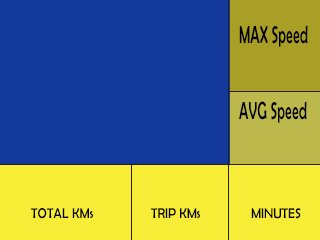
<style>
.page{position:relative;width:320px;height:240px;background:#13399b}
.page>*{position:absolute;margin:0}
.t1{font:24.9px "BerlinSansFB-Reg";color:#000000;scale:0.58 1}
.t2{font:14.3px "BerlinSansFB-Reg";color:#000000;scale:0.9 1}
.t3{font:14.3px "BerlinSansFB-Reg";color:#000000;scale:0.89 1}
</style>
<div class="page">
<p class="t1" style="left:239px;top:25px;width:69px;height:22px">MAX Speed</p>
<p class="t1" style="left:239px;top:101px;width:68px;height:22px">AVG Speed</p>
<p class="t2" style="left:31px;top:208px;width:62px;height:11px">TOTAL KMs</p>
<p class="t3" style="left:151px;top:208px;width:49px;height:10px">TRIP KMs</p>
<p class="t3" style="left:251px;top:208px;width:50px;height:11px">MINUTES</p>
</div>
